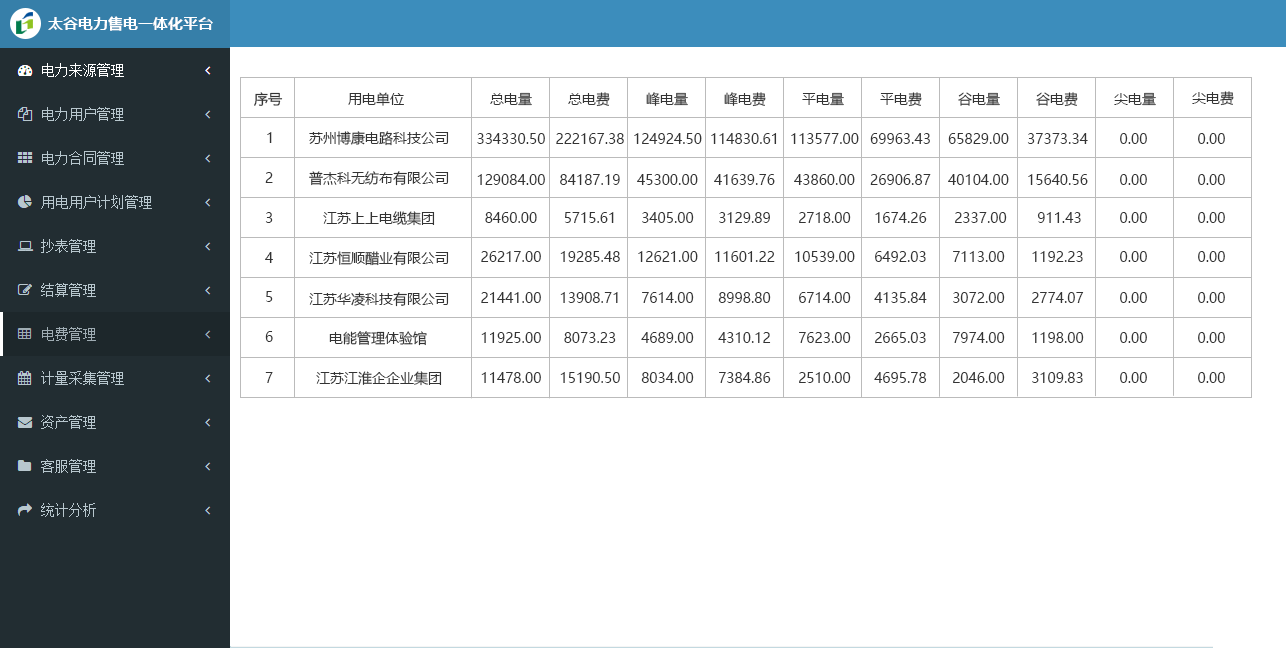
<style>
.page{position:relative;width:1286px;height:648px;background:#ffffff}
.page>*{position:absolute;margin:0}
.t1{font:15px "MicrosoftYaHei-Bold";color:#ffffff}
.t2{font:14px "MicrosoftYaHei";color:#333333}
</style>
<div class="page">
<p class="t1" style="left:48px;top:16px;width:165px;height:15px">太谷电力售电一体化平台</p>
<p class="t2" style="left:254px;top:92px;width:29px;height:14px">序号</p>
<p class="t2" style="left:348px;top:92px;width:56px;height:14px">用电单位</p>
<p class="t2" style="left:490px;top:92px;width:42px;height:14px">总电量</p>
<p class="t2" style="left:568px;top:92px;width:42px;height:15px">总电费</p>
<p class="t2" style="left:646px;top:92px;width:42px;height:14px">峰电量</p>
<p class="t2" style="left:724px;top:92px;width:42px;height:15px">峰电费</p>
<p class="t2" style="left:802px;top:92px;width:42px;height:14px">平电量</p>
<p class="t2" style="left:880px;top:92px;width:42px;height:15px">平电费</p>
<p class="t2" style="left:958px;top:92px;width:42px;height:14px">谷电量</p>
<p class="t2" style="left:1036px;top:92px;width:42px;height:15px">谷电费</p>
<p class="t2" style="left:1114px;top:92px;width:42px;height:14px">尖电量</p>
<p class="t2" style="left:1192px;top:91px;width:42px;height:15px">尖电费</p>
<p class="t2" style="left:267px;top:132px;width:5px;height:11px">1</p>
<p class="t2" style="left:309px;top:131px;width:140px;height:15px">苏州博康电路科技公司</p>
<p class="t2" style="left:477px;top:133px;width:68px;height:11px">334330.50</p>
<p class="t2" style="left:556px;top:133px;width:68px;height:11px">222167.38</p>
<p class="t2" style="left:634px;top:133px;width:68px;height:11px">124924.50</p>
<p class="t2" style="left:711px;top:133px;width:66px;height:11px">114830.61</p>
<p class="t2" style="left:791px;top:133px;width:68px;height:11px">113577.00</p>
<p class="t2" style="left:870px;top:133px;width:60px;height:11px">69963.43</p>
<p class="t2" style="left:948px;top:133px;width:61px;height:11px">65829.00</p>
<p class="t2" style="left:1027px;top:133px;width:61px;height:11px">37373.34</p>
<p class="t2" style="left:1120px;top:133px;width:27px;height:11px">0.00</p>
<p class="t2" style="left:1198px;top:133px;width:27px;height:11px">0.00</p>
<p class="t2" style="left:265px;top:172px;width:8px;height:11px">2</p>
<p class="t2" style="left:309px;top:171px;width:140px;height:15px">普杰科无纺布有限公司</p>
<p class="t2" style="left:477px;top:174px;width:68px;height:11px">129084.00</p>
<p class="t2" style="left:560px;top:174px;width:60px;height:11px">84187.19</p>
<p class="t2" style="left:637px;top:174px;width:61px;height:11px">45300.00</p>
<p class="t2" style="left:714px;top:174px;width:61px;height:11px">41639.76</p>
<p class="t2" style="left:794px;top:174px;width:61px;height:11px">43860.00</p>
<p class="t2" style="left:870px;top:174px;width:61px;height:11px">26906.87</p>
<p class="t2" style="left:948px;top:174px;width:61px;height:11px">40104.00</p>
<p class="t2" style="left:1028px;top:174px;width:60px;height:11px">15640.56</p>
<p class="t2" style="left:1120px;top:174px;width:27px;height:11px">0.00</p>
<p class="t2" style="left:1198px;top:174px;width:27px;height:11px">0.00</p>
<p class="t2" style="left:265px;top:212px;width:8px;height:11px">3</p>
<p class="t2" style="left:323px;top:211px;width:112px;height:15px">江苏上上电缆集团</p>
<p class="t2" style="left:485px;top:212px;width:52px;height:11px">8460.00</p>
<p class="t2" style="left:564px;top:212px;width:50px;height:11px">5715.61</p>
<p class="t2" style="left:642px;top:212px;width:52px;height:11px">3405.00</p>
<p class="t2" style="left:719px;top:212px;width:51px;height:11px">3129.89</p>
<p class="t2" style="left:799px;top:212px;width:52px;height:11px">2718.00</p>
<p class="t2" style="left:875px;top:212px;width:52px;height:11px">1674.26</p>
<p class="t2" style="left:955px;top:212px;width:52px;height:11px">2337.00</p>
<p class="t2" style="left:1037px;top:212px;width:44px;height:11px">911.43</p>
<p class="t2" style="left:1120px;top:212px;width:27px;height:11px">0.00</p>
<p class="t2" style="left:1198px;top:212px;width:27px;height:11px">0.00</p>
<p class="t2" style="left:265px;top:252px;width:8px;height:11px">4</p>
<p class="t2" style="left:309px;top:251px;width:140px;height:15px">江苏恒顺醋业有限公司</p>
<p class="t2" style="left:481px;top:251px;width:60px;height:11px">26217.00</p>
<p class="t2" style="left:560px;top:251px;width:60px;height:11px">19285.48</p>
<p class="t2" style="left:638px;top:251px;width:60px;height:11px">12621.00</p>
<p class="t2" style="left:715px;top:251px;width:60px;height:11px">11601.22</p>
<p class="t2" style="left:795px;top:251px;width:60px;height:11px">10539.00</p>
<p class="t2" style="left:875px;top:251px;width:51px;height:11px">6492.03</p>
<p class="t2" style="left:953px;top:251px;width:52px;height:11px">7113.00</p>
<p class="t2" style="left:1032px;top:251px;width:51px;height:11px">1192.23</p>
<p class="t2" style="left:1120px;top:251px;width:27px;height:11px">0.00</p>
<p class="t2" style="left:1198px;top:251px;width:27px;height:11px">0.00</p>
<p class="t2" style="left:266px;top:291px;width:7px;height:11px">5</p>
<p class="t2" style="left:309px;top:292px;width:140px;height:15px">江苏华凌科技有限公司</p>
<p class="t2" style="left:481px;top:292px;width:60px;height:11px">21441.00</p>
<p class="t2" style="left:560px;top:292px;width:58px;height:11px">13908.71</p>
<p class="t2" style="left:642px;top:292px;width:52px;height:11px">7614.00</p>
<p class="t2" style="left:718px;top:292px;width:53px;height:11px">8998.80</p>
<p class="t2" style="left:799px;top:292px;width:52px;height:11px">6714.00</p>
<p class="t2" style="left:874px;top:292px;width:53px;height:11px">4135.84</p>
<p class="t2" style="left:953px;top:292px;width:52px;height:11px">3072.00</p>
<p class="t2" style="left:1032px;top:292px;width:52px;height:11px">2774.07</p>
<p class="t2" style="left:1120px;top:292px;width:27px;height:11px">0.00</p>
<p class="t2" style="left:1198px;top:292px;width:27px;height:11px">0.00</p>
<p class="t2" style="left:265px;top:331px;width:8px;height:11px">6</p>
<p class="t2" style="left:329px;top:331px;width:98px;height:15px">电能管理体验馆</p>
<p class="t2" style="left:481px;top:332px;width:60px;height:11px">11925.00</p>
<p class="t2" style="left:564px;top:332px;width:52px;height:11px">8073.23</p>
<p class="t2" style="left:641px;top:332px;width:53px;height:11px">4689.00</p>
<p class="t2" style="left:718px;top:332px;width:53px;height:11px">4310.12</p>
<p class="t2" style="left:799px;top:332px;width:52px;height:11px">7623.00</p>
<p class="t2" style="left:875px;top:332px;width:51px;height:11px">2665.03</p>
<p class="t2" style="left:953px;top:332px;width:52px;height:11px">7974.00</p>
<p class="t2" style="left:1032px;top:332px;width:52px;height:11px">1198.00</p>
<p class="t2" style="left:1120px;top:332px;width:27px;height:11px">0.00</p>
<p class="t2" style="left:1198px;top:332px;width:27px;height:11px">0.00</p>
<p class="t2" style="left:265px;top:372px;width:8px;height:11px">7</p>
<p class="t2" style="left:316px;top:371px;width:126px;height:15px">江苏江淮企企业集团</p>
<p class="t2" style="left:481px;top:372px;width:60px;height:11px">11478.00</p>
<p class="t2" style="left:560px;top:372px;width:60px;height:11px">15190.50</p>
<p class="t2" style="left:641px;top:372px;width:53px;height:11px">8034.00</p>
<p class="t2" style="left:719px;top:372px;width:52px;height:11px">7384.86</p>
<p class="t2" style="left:799px;top:372px;width:52px;height:11px">2510.00</p>
<p class="t2" style="left:874px;top:372px;width:53px;height:11px">4695.78</p>
<p class="t2" style="left:953px;top:372px;width:52px;height:11px">2046.00</p>
<p class="t2" style="left:1032px;top:372px;width:51px;height:11px">3109.83</p>
<p class="t2" style="left:1120px;top:372px;width:27px;height:11px">0.00</p>
<p class="t2" style="left:1198px;top:372px;width:27px;height:11px">0.00</p>
</div>
